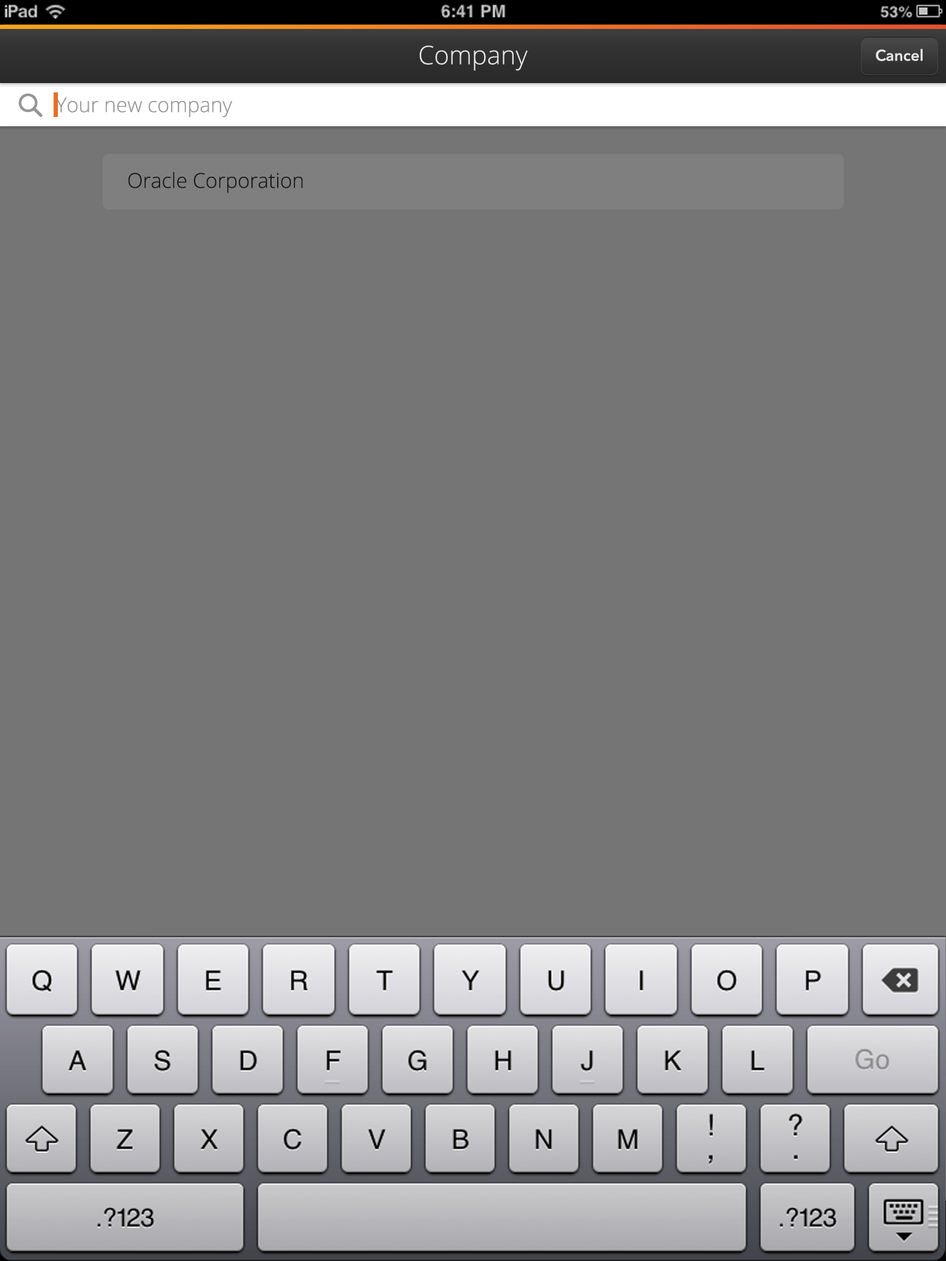
<style>
.page{position:relative;width:946px;height:1261px;background:#757575}
.page>*{position:absolute;margin:0}
.t1{font:25.7px "OpenSans-Light";color:#e5e5e5}
.t2{font:15.4px "AvenirNext-DemiBold";color:#e5e5e5}
.t3{font:20.5px "OpenSans-Light";color:#969696}
</style>
<div class="page">
<p class="t1" style="left:419px;top:46px;width:109px;height:25px">Company</p>
<p class="t2" style="left:875px;top:49px;width:47px;height:13px">Cancel</p>
<p class="t3" style="left:55px;top:97px;width:177px;height:21px">Your new company</p>
</div>
